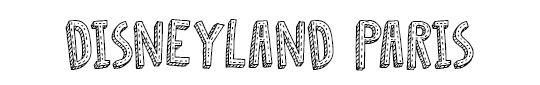
<style>
.page{position:relative;width:540px;height:85px;background:#ffffff}
.page>*{position:absolute;margin:0}
.t1{font:60px "DKCosmoStitch";color:#000000}
</style>
<div class="page">
<p class="t1" style="left:65px;top:19px;width:409px;height:52px">DisneyLand Paris</p>
</div>
